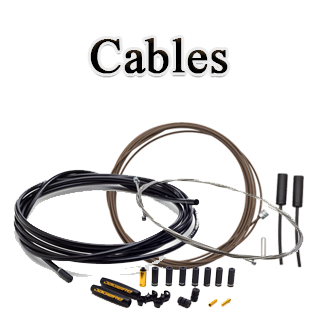
<style>
.page{position:relative;width:331px;height:313px;background:#ffffff}
.page>*{position:absolute;margin:0}
.t1{font:48px "TimesNewRomanPSMT";letter-spacing:0.005em;color:#000000;font-weight:bold}
</style>
<div class="page">
<p class="t1" style="left:90px;top:38px;width:138px;height:36px">Cables</p>
</div>
